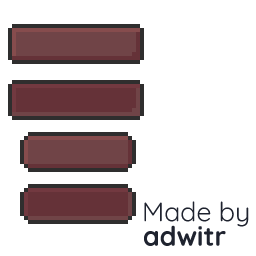
<style>
.page{position:relative;width:256px;height:256px;background:#ffffff}
.page>*{position:absolute;margin:0}
.t1{font:26.8px "Quicksand-Regular";color:#1f232f}
.t2{font:26.8px "Quicksand-Bold";color:#1f232f}
</style>
<div class="page">
<p class="t1" style="left:144px;top:201px;width:105px;height:26px">Made by</p>
<p class="t2" style="left:144px;top:225px;width:82px;height:21px">adwitr</p>
</div>
